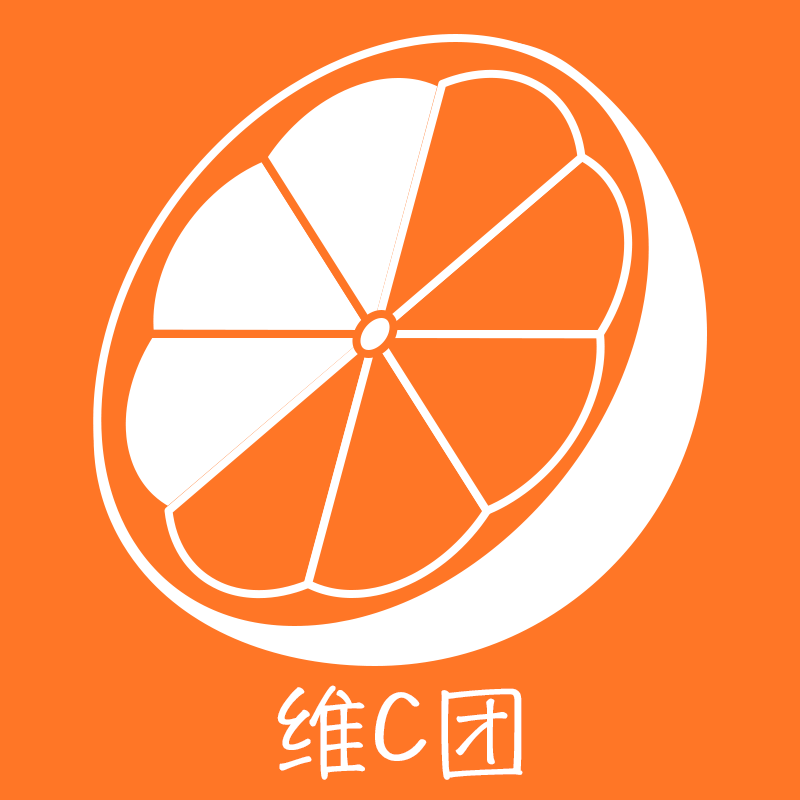
<style>
.page{position:relative;width:800px;height:800px;background:#ff7626}
.page>*{position:absolute;margin:0}
.t1{font:100px "HannotateSC-W5";color:#ffffff}
</style>
<div class="page">
<p class="t1" style="left:277px;top:685px;width:246px;height:95px">维C团</p>
</div>
